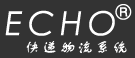
<style>
.page{position:relative;width:135px;height:58px;background:#333333}
.page>*{position:absolute;margin:0}
.t1{font:20.4px "CenturyGothic-Italic";letter-spacing:0.16em;color:#ffffff;text-transform:uppercase}
.t2{font:33px "CenturyGothic-Italic";letter-spacing:0.16em;color:#ffffff;text-transform:uppercase}
.t3{font:15.1px "FZSTK--GBK1-0";letter-spacing:0.16em;color:#ffffff;text-transform:uppercase}
</style>
<div class="page">
<p class="t1" style="left:115px;top:4px;width:17px;height:16px">®</p>
<p class="t2" style="left:5px;top:10px;width:110px;height:26px">ecHO</p>
<p class="t3" style="left:26px;top:41px;width:101px;height:13px">快递物流系统</p>
</div>
